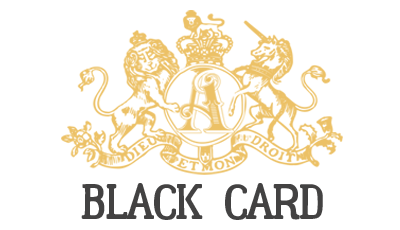
<style>
.page{position:relative;width:400px;height:230px;background:#ffffff}
.page>*{position:absolute;margin:0}
.t1{font:50px "Lumberjack";letter-spacing:-0.05em;color:#434242}
</style>
<div class="page">
<p class="t1" style="left:81px;top:183px;width:242px;height:37px">BLACK   CARD</p>
</div>
